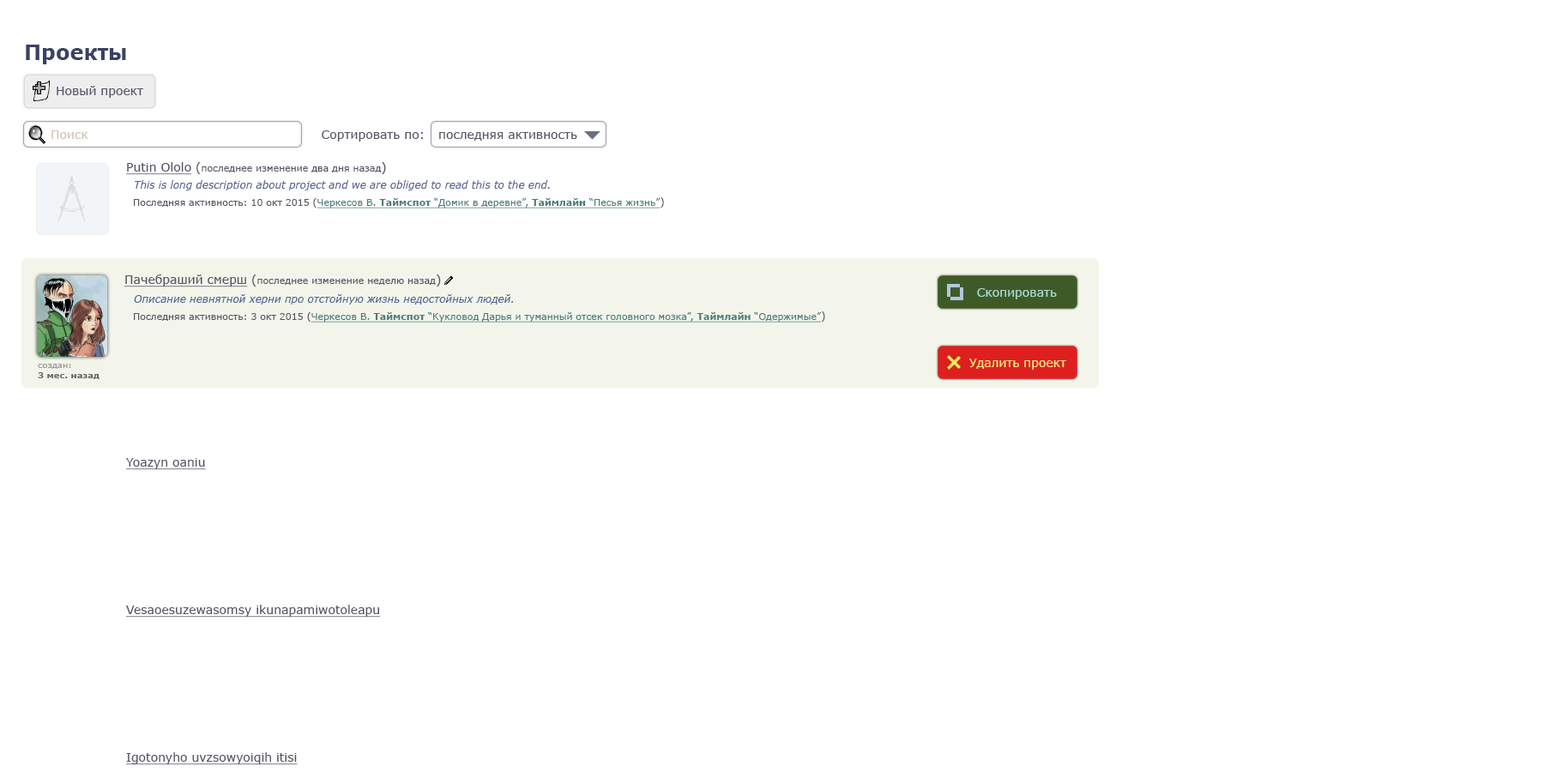
<style>
.page{position:relative;width:1544px;height:772px;background:#ffffff}
.page>*{position:absolute;margin:0}
.t1{font:20.6px "Verdana-Bold";color:#3a4164}
.t2{font:12px "Verdana";color:#545765}
.t3{font:12px "Verdana";color:#cfc4b6}
.t4{font:10.3px "Verdana-Italic";color:#576297}
.t5{font:9.4px "Verdana";color:#545765}
.t6{font:9.4px "Verdana";color:#4b7d7a;text-decoration:underline}
.t7{font:9.4px "Verdana-Bold";color:#4b7d7a;text-decoration:underline}
.t8{font:10.3px "Verdana";color:#545765}
.t9{font:12px "Verdana";color:#545765;text-decoration:underline}
.t10{font:12px "Verdana";color:#a8d9ce}
.t11{font:8.6px "Verdana-Bold";color:#666666}
.t12{font:8.6px "Verdana";color:#989898}
.t13{font:12px "Verdana";color:#f6e781}
</style>
<div class="page">
<p class="t1" style="left:26px;top:45px;width:100px;height:19px">Проекты</p>
<p class="t2" style="left:57px;top:86px;width:86px;height:12px">Новый проект</p>
<p class="t3" style="left:51px;top:130px;width:37px;height:9px">Поиск</p>
<p class="t2" style="left:322px;top:130px;width:101px;height:12px">Сортировать по:</p>
<p class="t2" style="left:439px;top:132px;width:138px;height:9px">последняя активность</p>
<p class="t4" style="left:135px;top:180px;width:415px;height:10px">This is long description about project and we are obliged to read this to the end.</p>
<p class="t5" style="left:134px;top:197px;width:530px;height:11px">Последняя активность: 10 окт 2015 (<span class="t6">Черкесов В. </span><span class="t7">Таймспот</span><span class="t6"> “Домик в деревне”, </span><span class="t7">Таймлайн</span><span class="t6"> “Песья жизнь”</span><span class="t8">)</span></p>
<p class="t5" style="left:124px;top:275px;width:317px;height:12px"><span class="t9">Пачебраший смерш</span><span class="t2"> (</span>последнее изменение неделю назад<span class="t2">)</span></p>
<p class="t10" style="left:977px;top:288px;width:80px;height:11px">Скопировать</p>
<p class="t4" style="left:134px;top:294px;width:380px;height:11px">Описание невнятной херни про отстойную жизнь недостойных людей.</p>
<p class="t6" style="left:134px;top:311px;width:691px;height:12px"><span class="t5">Последняя активность: 3 окт 2015 (</span>Черкесов В. <span class="t7">Таймспот</span> “Кукловод Дарья и туманный отсек головного мозка”, <span class="t7">Таймлайн</span> “Одержимые”<span class="t8">)</span></p>
<p class="t11" style="left:38px;top:364px;width:62px;height:15px"><span class="t12">создан:<br></span>3 мес. назад</p>
<p class="t13" style="left:969px;top:359px;width:97px;height:11px">Удалить проект</p>
</div>
